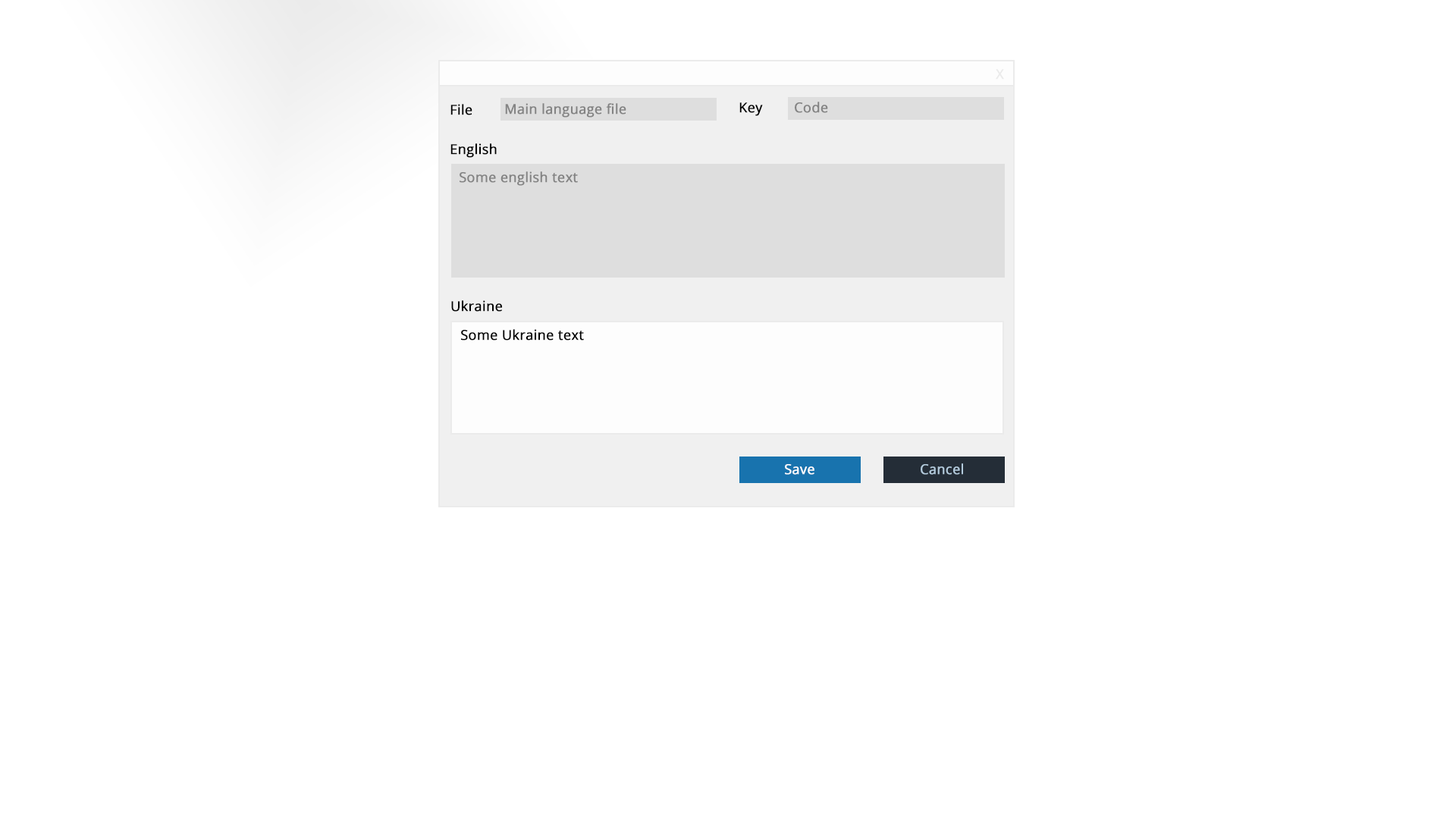
<style>
.page{position:relative;width:1456px;height:819px;background:#ffffff}
.page>*{position:absolute;margin:0}
.t1{font:13.6px "OpenSans-Regular";color:#ebebeb;font-weight:bold}
.t2{font:13.6px "OpenSans-Regular";color:#838383;font-weight:bold}
.t3{font:13.6px "OpenSans-Regular";color:#000000;font-weight:bold}
.t4{font:13.6px "OpenSans-Regular";color:#ffffff;font-weight:bold}
.t5{font:13.6px "OpenSans-Regular";color:#b3cbdd;font-weight:bold}
</style>
<div class="page">
<p class="t1" style="left:996px;top:69px;width:8px;height:11px">X</p>
<p class="t2" style="left:795px;top:102px;width:33px;height:11px">Code</p>
<p class="t3" style="left:450px;top:104px;width:22px;height:11px">File</p>
<p class="t2" style="left:505px;top:103px;width:121px;height:15px">Main language file</p>
<p class="t3" style="left:739px;top:102px;width:24px;height:14px">Key</p>
<p class="t3" style="left:450px;top:143px;width:47px;height:15px">English</p>
<p class="t2" style="left:460px;top:171px;width:118px;height:15px">Some english text</p>
<p class="t3" style="left:451px;top:300px;width:51px;height:12px">Ukraine</p>
<p class="t3" style="left:461px;top:329px;width:123px;height:11px">Some Ukraine text</p>
<p class="t4" style="left:785px;top:464px;width:29px;height:11px">Save</p>
<p class="t5" style="left:921px;top:463px;width:42px;height:12px">Cancel</p>
</div>
